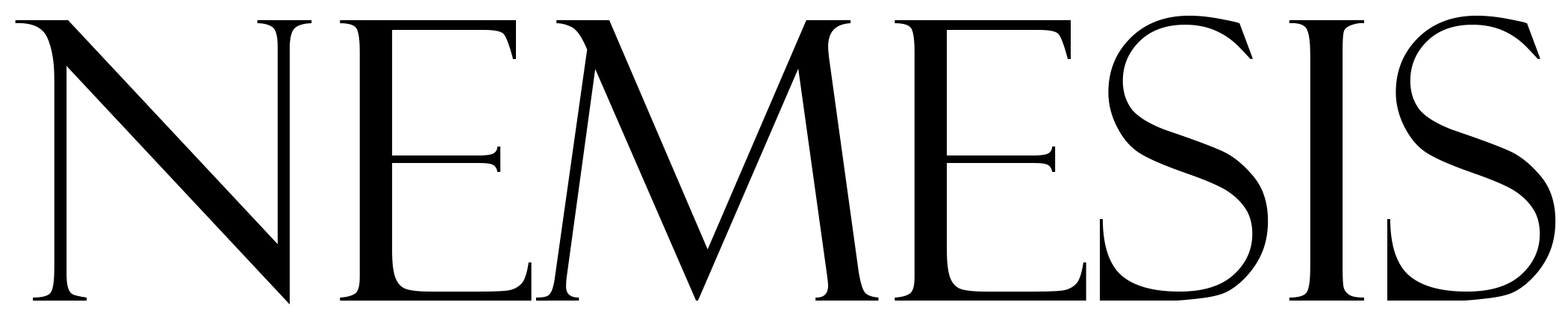
<style>
.page{position:relative;width:1568px;height:323px;background:#ffffff}
.page>*{position:absolute;margin:0}
.t1{font:388.9px "FelixTitlingMT";color:#000000}
</style>
<div class="page">
<p class="t1" style="left:15px;top:15px;width:1541px;height:289px">nemesis</p>
</div>
